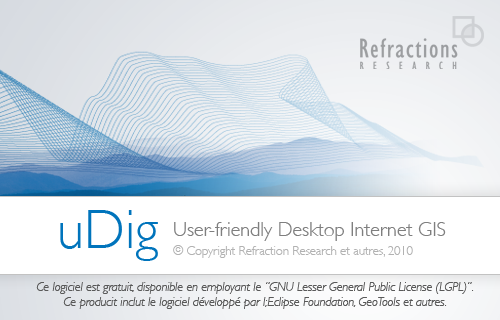
<style>
.page{position:relative;width:500px;height:320px;background:#ffffff}
.page>*{position:absolute;margin:0}
.t1{font:55px "GillSans-Light";color:#0074bc}
.t2{font:20px "GillSans-Light";color:#7f7f7f}
.t3{font:12.5px "GillSans-Light";color:#b2b2b2}
.t4{font:12.5px "GillSans-LightItalic";color:#595959}
</style>
<div class="page">
<p class="t1" style="left:60px;top:210px;width:98px;height:51px">uDig</p>
<p class="t2" style="left:174px;top:222px;width:272px;height:19px">User-friendly Desktop Internet GIS</p>
<p class="t3" style="left:173px;top:245px;width:240px;height:13px">© Copyright Refraction Research et autres, 2010</p>
<p class="t4" style="left:36px;top:282px;width:438px;height:27px;text-align:center">Ce logiciel est gratuit, disponible en employant le “GNU Lesser General Public License (LGPL)”.<br>Ce producit inclut le logiciel développé par l;Eclipse Foundation, GeoTools et autres.</p>
</div>
